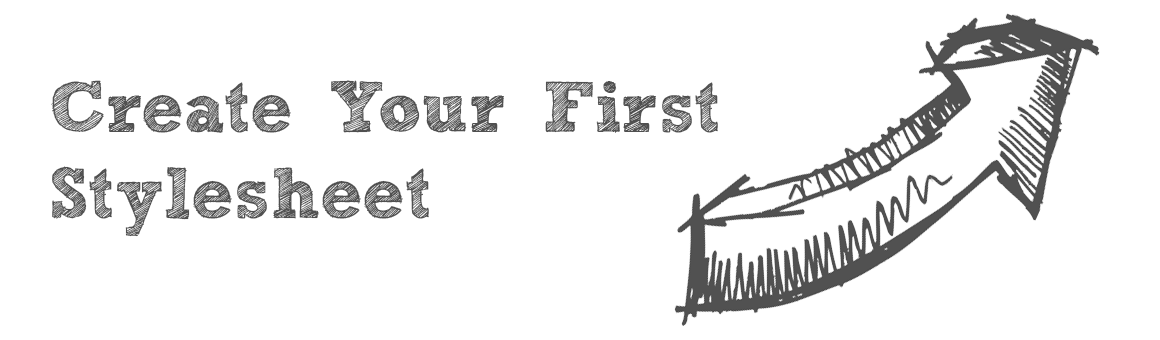
<style>
.page{position:relative;width:1160px;height:340px;background:#ffffff}
.page>*{position:absolute;margin:0}
.t1{font:72px "freeversionSketchBlock-Bold";color:#505050}
</style>
<div class="page">
<p class="t1" style="left:51px;top:80px;width:667px;height:157px">Create Your First Stylesheet</p>
</div>
